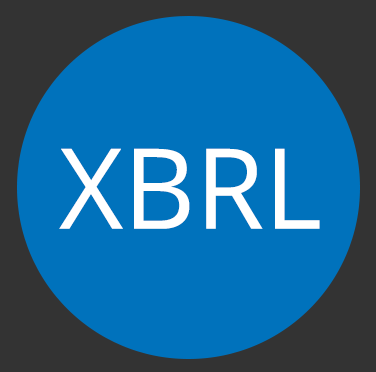
<style>
.page{position:relative;width:376px;height:372px;background:#0072bc}
.page>*{position:absolute;margin:0}
.t1{font:111.7px "OpenSans";color:#ffffff}
</style>
<div class="page">
<p class="t1" style="left:59px;top:148px;width:261px;height:81px">XBRL</p>
</div>
